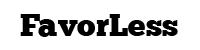
<style>
.page{position:relative;width:200px;height:50px;background:#ffffff}
.page>*{position:absolute;margin:0}
.t1{font:32px "ChunkFiveEx";color:#000000}
</style>
<div class="page">
<p class="t1" style="left:20px;top:14px;width:158px;height:23px">FavorLess</p>
</div>
